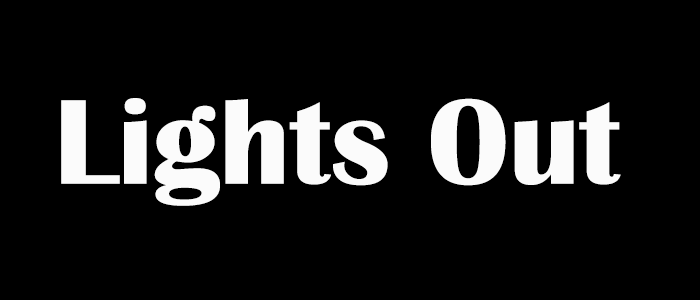
<style>
.page{position:relative;width:700px;height:300px;background:#000000}
.page>*{position:absolute;margin:0}
.t1{font:125px "BritannicBold";color:#fcfcfc}
</style>
<div class="page">
<p class="t1" style="left:61px;top:98px;width:560px;height:108px">Lights Out</p>
</div>
